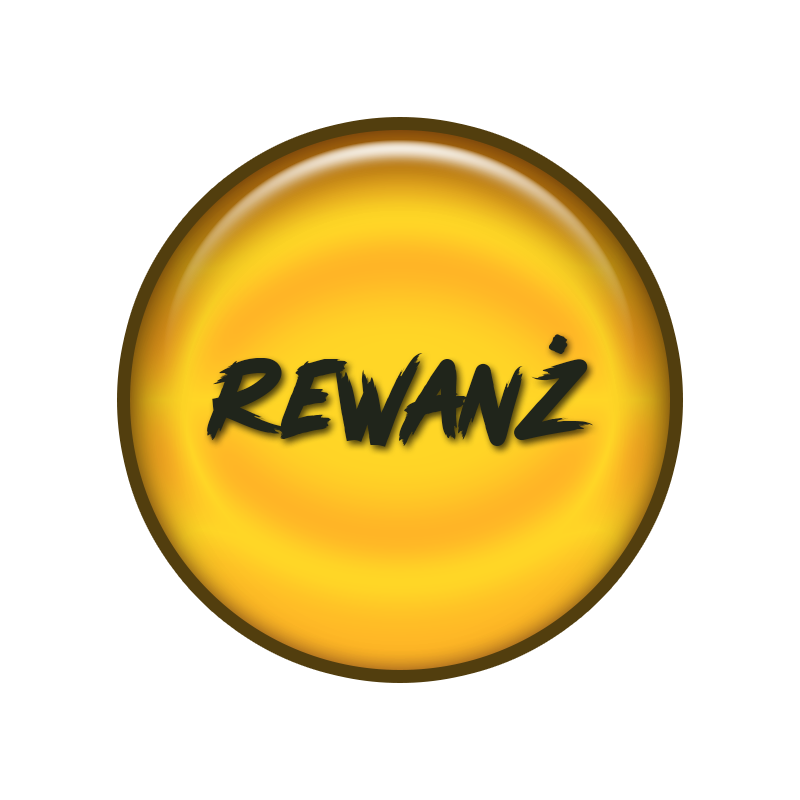
<style>
.page{position:relative;width:800px;height:800px;background:#ffffff}
.page>*{position:absolute;margin:0}
.t1{font:122.2px "PinkBlue";color:#20251b}
</style>
<div class="page">
<p class="t1" style="left:548px;top:334px;width:20px;height:20px">.</p>
<p class="t1" style="left:207px;top:353px;width:387px;height:94px">rewanz</p>
</div>
